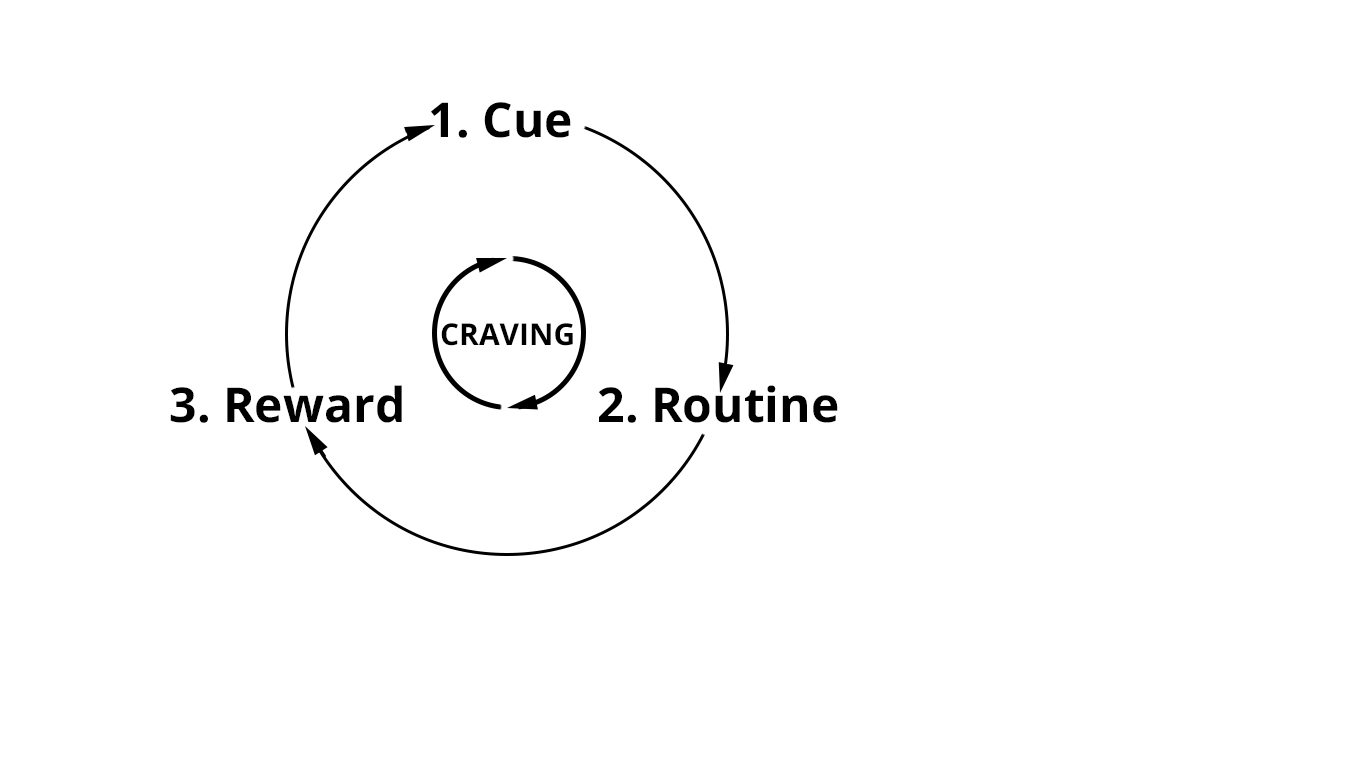
<style>
.page{position:relative;width:1366px;height:768px;background:#ffffff}
.page>*{position:absolute;margin:0}
.t1{font:48px "OpenSans-Bold";color:#000000}
.t2{font:30px "OpenSans-Bold";color:#000000}
</style>
<div class="page">
<p class="t1" style="left:431px;top:102px;width:140px;height:36px">1. Cue</p>
<p class="t2" style="left:441px;top:323px;width:132px;height:23px">CRAVING</p>
<p class="t1" style="left:170px;top:385px;width:232px;height:38px">3. Reward</p>
<p class="t1" style="left:598px;top:385px;width:240px;height:38px">2. Routine</p>
</div>
